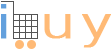
<style>
.page{position:relative;width:112px;height:50px;background:#ffffff}
.page>*{position:absolute;margin:0}
.t1{font:45px "Roboto-Light";letter-spacing:0.1em;color:#ffba76;font-weight:bold;scale:1.34 1}
.t2{font:45px "Roboto-Light";letter-spacing:0.1em;color:#63a0dd;font-weight:bold;scale:1.34 1}
</style>
<div class="page">
<p class="t1" style="left:1px;top:4px;width:110px;height:44px"><span class="t2">i </span>uy</p>
</div>
